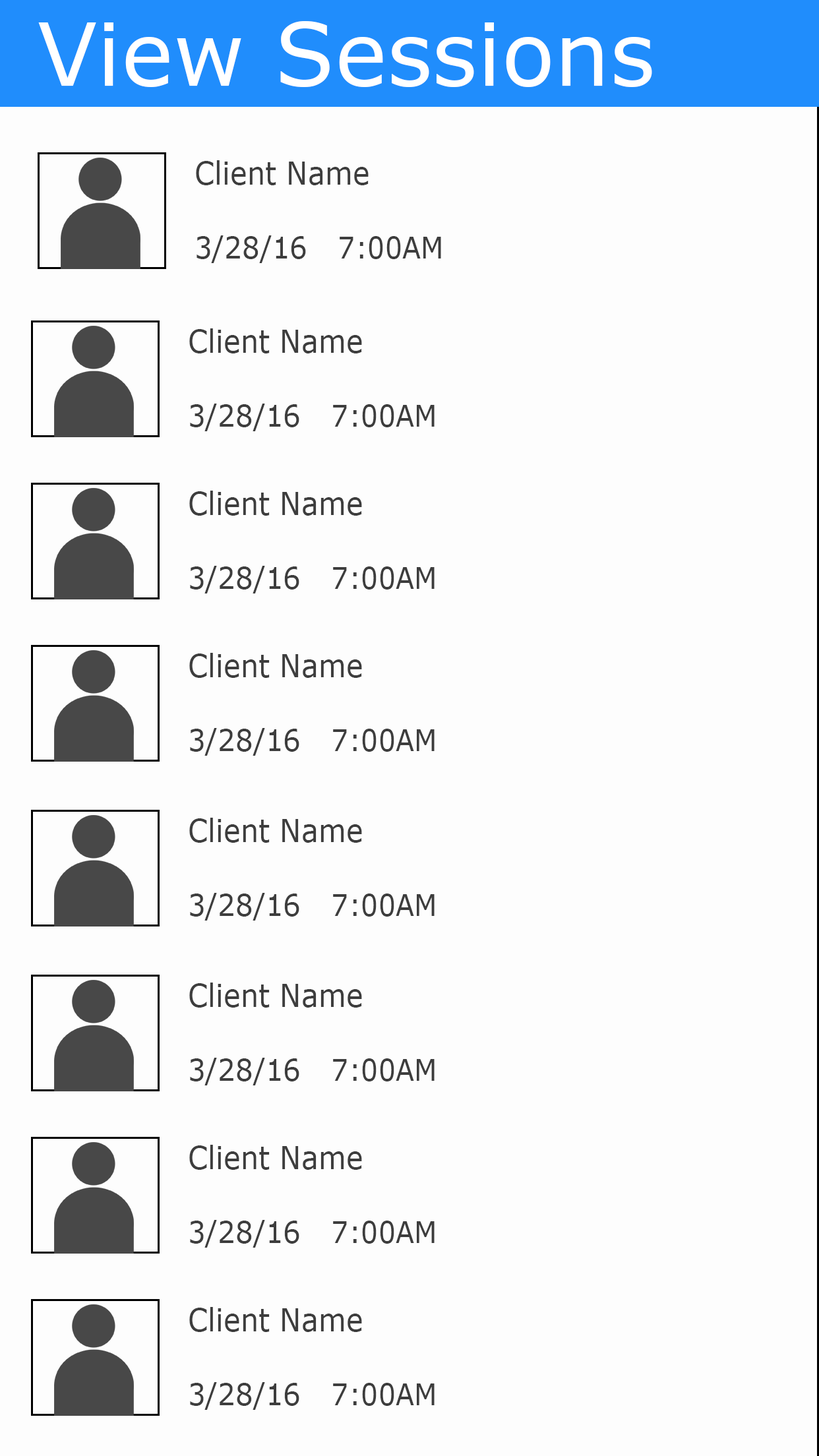
<style>
.page{position:relative;width:819px;height:1456px;background:#fdfdfd}
.page>*{position:absolute;margin:0}
.t1{font:87.2px "MSReferenceSansSerif";color:#ffffff}
.t2{font:31.4px "MSReferenceSansSerif";color:#3d3d3d;scale:0.91 1}
.t3{font:30.4px "MSReferenceSansSerif";color:#3d3d3d;scale:0.91 1}
.t4{font:29.9px "MSReferenceSansSerif";color:#3d3d3d;scale:0.91 1}
</style>
<div class="page">
<p class="t1" style="left:38px;top:21px;width:614px;height:66px">View Sessions</p>
<p class="t2" style="left:196px;top:160px;width:173px;height:25px">Client Name</p>
<p class="t3" style="left:197px;top:235px;width:109px;height:28px">3/28/16</p>
<p class="t4" style="left:340px;top:236px;width:101px;height:23px">7:00AM</p>
<p class="t2" style="left:189px;top:328px;width:173px;height:25px">Client Name</p>
<p class="t3" style="left:190px;top:404px;width:109px;height:27px">3/28/16</p>
<p class="t4" style="left:333px;top:404px;width:102px;height:23px">7:00AM</p>
<p class="t2" style="left:189px;top:491px;width:173px;height:25px">Client Name</p>
<p class="t3" style="left:190px;top:566px;width:109px;height:27px">3/28/16</p>
<p class="t4" style="left:333px;top:566px;width:102px;height:24px">7:00AM</p>
<p class="t2" style="left:189px;top:653px;width:173px;height:25px">Client Name</p>
<p class="t3" style="left:190px;top:728px;width:109px;height:28px">3/28/16</p>
<p class="t4" style="left:333px;top:729px;width:102px;height:23px">7:00AM</p>
<p class="t2" style="left:189px;top:818px;width:173px;height:25px">Client Name</p>
<p class="t3" style="left:190px;top:893px;width:109px;height:28px">3/28/16</p>
<p class="t4" style="left:333px;top:894px;width:102px;height:23px">7:00AM</p>
<p class="t2" style="left:189px;top:983px;width:173px;height:25px">Client Name</p>
<p class="t3" style="left:190px;top:1058px;width:109px;height:27px">3/28/16</p>
<p class="t4" style="left:333px;top:1058px;width:102px;height:23px">7:00AM</p>
<p class="t2" style="left:189px;top:1145px;width:173px;height:25px">Client Name</p>
<p class="t3" style="left:190px;top:1220px;width:109px;height:28px">3/28/16</p>
<p class="t4" style="left:333px;top:1221px;width:102px;height:23px">7:00AM</p>
<p class="t2" style="left:189px;top:1307px;width:173px;height:25px">Client Name</p>
<p class="t3" style="left:190px;top:1382px;width:109px;height:28px">3/28/16</p>
<p class="t4" style="left:333px;top:1383px;width:102px;height:23px">7:00AM</p>
</div>
